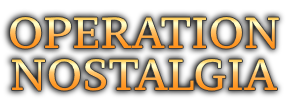
<style>
.page{position:relative;width:293px;height:109px;background:#ffffff}
.page>*{position:absolute;margin:0}
.t1{font:43.5px "PTSerif-Caption"}
</style>
<div class="page">
<p class="t1" style="left:10px;top:17px;width:269px;height:32px">OPERATION</p>
<p class="t1" style="left:12px;top:59px;width:265px;height:32px">NOSTALGIA</p>
</div>
